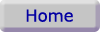
<style>
.page{position:relative;width:100px;height:32px;background:#c5c5c5}
.page>*{position:absolute;margin:0}
.t1{font:16.3px "Verdana";color:#0400a2}
</style>
<div class="page">
<p class="t1" style="left:26px;top:9px;width:47px;height:13px">Home</p>
</div>
